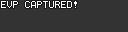
<style>
.page{position:relative;width:128px;height:32px;background:#333333}
.page>*{position:absolute;margin:0}
.t1{font:8px "Terminal";color:#ffffff}
</style>
<div class="page">
<p class="t1" style="left:1px;top:1px;width:76px;height:7px">EVP CAPTURED!</p>
</div>
